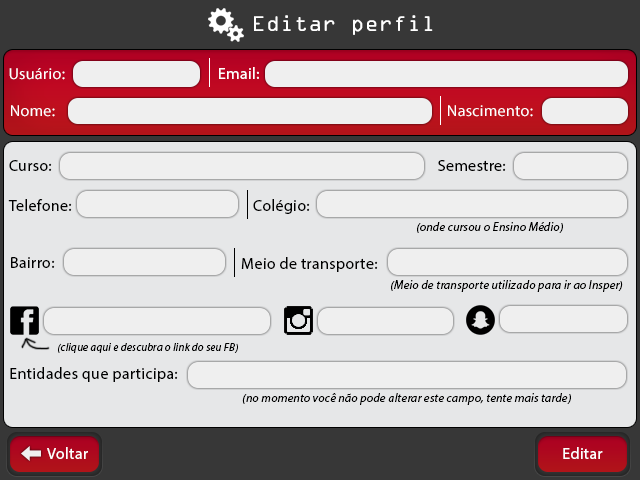
<style>
.page{position:relative;width:640px;height:480px;background:#e6e7e8}
.page>*{position:absolute;margin:0}
.t1{font:22.7px "OCRAExtended";letter-spacing:0.02em;color:#ffffff}
.t2{font:16px "MyriadPro-Regular";letter-spacing:0.02em;color:#ffffff}
.t3{font:16px "MyriadPro-Regular";letter-spacing:0.02em;color:#000000}
.t4{font:12px "MyriadPro-It";letter-spacing:0.02em;color:#000000}
.t5{font:11px "MyriadPro-It";letter-spacing:0.02em;color:#000000}
</style>
<div class="page">
<p class="t1" style="left:254px;top:15px;width:179px;height:20px">Editar perfil</p>
<p class="t2" style="left:9px;top:68px;width:56px;height:12px">Usuário:</p>
<p class="t2" style="left:219px;top:67px;width:40px;height:12px">Email:</p>
<p class="t2" style="left:11px;top:105px;width:44px;height:12px">Nome:</p>
<p class="t2" style="left:448px;top:105px;width:85px;height:12px">Nascimento:</p>
<p class="t3" style="left:9px;top:160px;width:43px;height:11px">Curso:</p>
<p class="t3" style="left:438px;top:160px;width:68px;height:11px">Semestre:</p>
<p class="t3" style="left:8px;top:199px;width:64px;height:12px">Telefone:</p>
<p class="t3" style="left:253px;top:199px;width:57px;height:15px">Colégio:</p>
<p class="t4" style="left:417px;top:222px;width:146px;height:11px">(onde cursou o Ensino Médio)</p>
<p class="t3" style="left:11px;top:257px;width:44px;height:11px">Bairro:</p>
<p class="t3" style="left:241px;top:257px;width:137px;height:15px">Meio de transporte:</p>
<p class="t4" style="left:391px;top:280px;width:232px;height:12px">(Meio de transporte utilizado para ir ao Insper)</p>
<p class="t5" style="left:58px;top:343px;width:180px;height:10px">(clique aqui e descubra o link do seu FB)</p>
<p class="t3" style="left:10px;top:367px;width:168px;height:15px">Entidades que participa:</p>
<p class="t4" style="left:242px;top:393px;width:329px;height:12px">(no momento você não pode alterar este campo, tente mais tarde)</p>
<p class="t2" style="left:47px;top:447px;width:41px;height:12px">Voltar</p>
<p class="t2" style="left:563px;top:447px;width:40px;height:12px">Editar</p>
</div>
